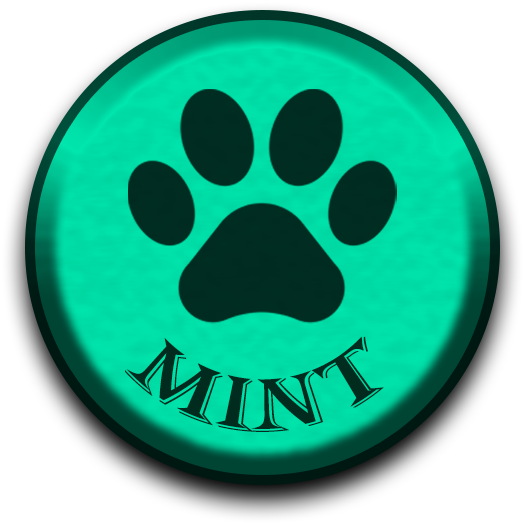
<style>
.page{position:relative;width:525px;height:525px;background:#ffffff}
.page>*{position:absolute;margin:0}
.t1{font:80px "Algerian";color:#002c1e}
</style>
<div class="page">
<p class="t1" style="left:125px;top:336px;width:259px;height:96px">MINT</p>
</div>
